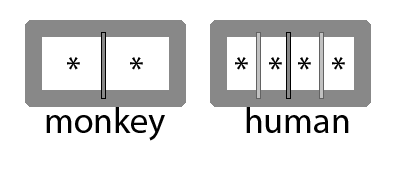
<style>
.page{position:relative;width:417px;height:172px;background:#ffffff}
.page>*{position:absolute;margin:0}
.t1{font:36px "MyriadPro-Regular";color:#000000}
</style>
<div class="page">
<p class="t1" style="left:67px;top:57px;width:13px;height:13px">*</p>
<p class="t1" style="left:130px;top:57px;width:13px;height:13px">*</p>
<p class="t1" style="left:235px;top:57px;width:13px;height:13px">*</p>
<p class="t1" style="left:269px;top:57px;width:13px;height:13px">*</p>
<p class="t1" style="left:298px;top:57px;width:13px;height:13px">*</p>
<p class="t1" style="left:332px;top:57px;width:13px;height:13px">*</p>
<p class="t1" style="left:46px;top:107px;width:119px;height:34px">monkey</p>
<p class="t1" style="left:246px;top:107px;width:103px;height:26px">human</p>
</div>
